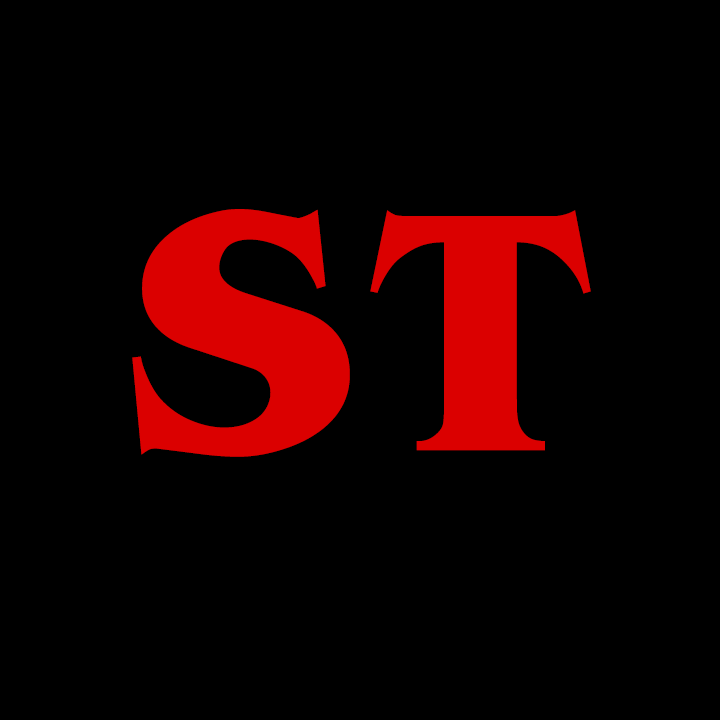
<style>
.page{position:relative;width:720px;height:720px;background:#000000}
.page>*{position:absolute;margin:0}
.t1{font:310.3px "BenguiatBold";color:#db0000}
</style>
<div class="page">
<p class="t1" style="left:132px;top:209px;width:459px;height:248px">ST</p>
</div>
